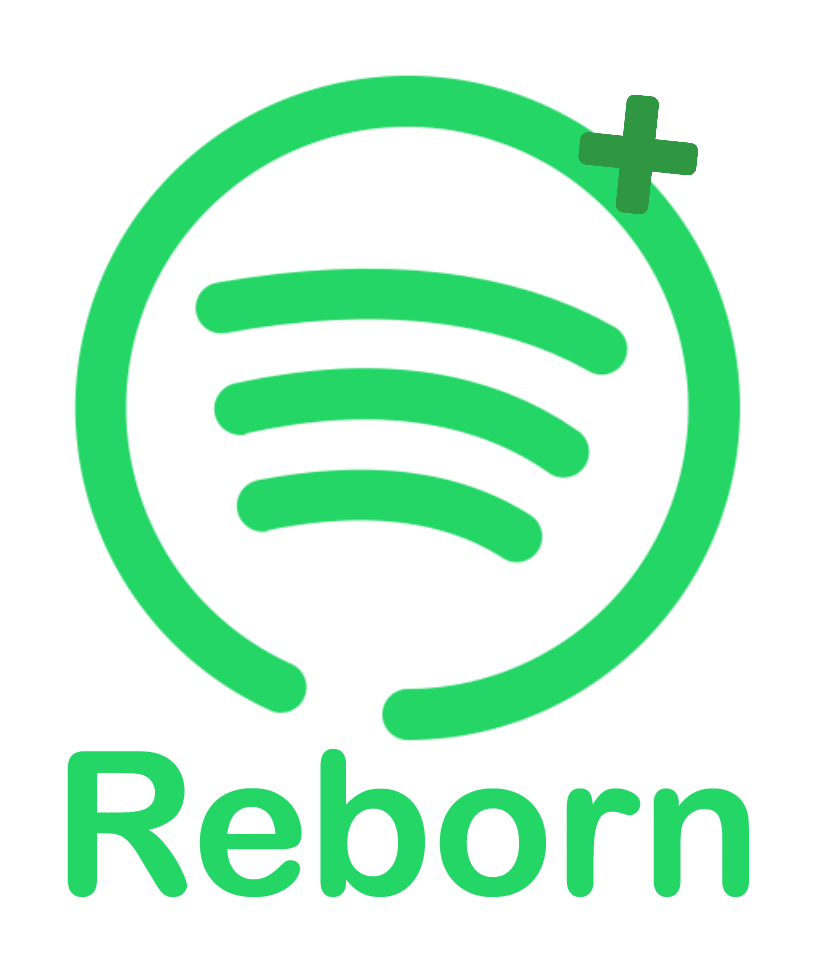
<style>
.page{position:relative;width:816px;height:965px;background:#ffffff}
.page>*{position:absolute;margin:0}
.t1{font:200px "ArialRoundedMTBold";color:#23d665}
</style>
<div class="page">
<p class="t1" style="left:67px;top:749px;width:682px;height:148px">Reborn</p>
</div>
